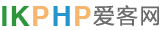
<style>
.page{position:relative;width:160px;height:30px;background:#ffffff}
.page>*{position:absolute;margin:0}
.t1{font:28px "Helvetica_cyr-Bold";letter-spacing:0.05em;color:#2e963d}
.t2{font:28px "Helvetica_cyr-Bold";letter-spacing:0.05em;color:#f7b56d}
.t3{font:28px "Helvetica_cyr-Bold";letter-spacing:0.05em;color:#2496cd}
.t4{font:21px "MicrosoftYaHei";letter-spacing:0.1em;color:#6b6b6b}
</style>
<div class="page">
<p class="t1" style="left:2px;top:6px;width:89px;height:20px">IK<span class="t2">P</span><span class="t3">H</span><span class="t2">P</span></p>
<p class="t4" style="left:93px;top:5px;width:66px;height:21px">爱客网</p>
</div>
